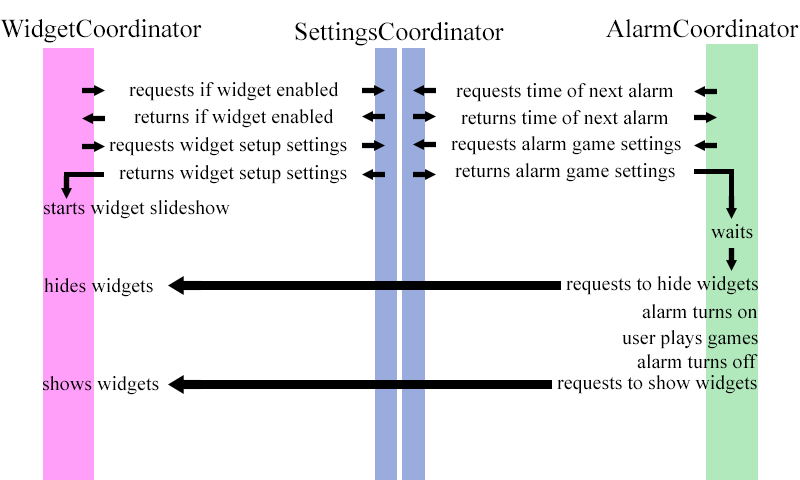
<style>
.page{position:relative;width:800px;height:480px;background:#ffffff}
.page>*{position:absolute;margin:0}
.t1{font:26px "TimesNewRomanPSMT";color:#000000}
.t2{font:20px "TimesNewRomanPSMT";color:#000000}
</style>
<div class="page">
<p class="t1" style="left:0px;top:19px;width:202px;height:24px">WidgetCoordinator</p>
<p class="t1" style="left:295px;top:22px;width:209px;height:24px">SettingsCoordinator</p>
<p class="t1" style="left:606px;top:19px;width:193px;height:19px">AlarmCoordinator</p>
<p class="t2" style="left:129px;top:82px;width:210px;height:19px">requests if widget enabled</p>
<p class="t2" style="left:456px;top:83px;width:218px;height:19px">requests time of next alarm</p>
<p class="t2" style="left:134px;top:109px;width:200px;height:19px">returns if widget enabled</p>
<p class="t2" style="left:461px;top:110px;width:208px;height:15px">returns time of next alarm</p>
<p class="t2" style="left:109px;top:137px;width:238px;height:19px">requests widget setup settings</p>
<p class="t2" style="left:451px;top:136px;width:230px;height:19px">requests alarm game settings</p>
<p class="t2" style="left:119px;top:165px;width:228px;height:19px">returns widget setup settings</p>
<p class="t2" style="left:455px;top:163px;width:220px;height:19px">returns alarm game settings</p>
<p class="t2" style="left:44px;top:200px;width:186px;height:19px">starts widget slideshow</p>
<p class="t2" style="left:711px;top:224px;width:42px;height:15px">waits</p>
<p class="t2" style="left:44px;top:278px;width:109px;height:19px">hides widgets</p>
<p class="t2" style="left:566px;top:276px;width:192px;height:19px">requests to hide widgets</p>
<p class="t2" style="left:642px;top:304px;width:116px;height:15px">alarm turns on</p>
<p class="t2" style="left:622px;top:330px;width:136px;height:19px">user plays games</p>
<p class="t2" style="left:637px;top:354px;width:121px;height:15px">alarm turns off</p>
<p class="t2" style="left:43px;top:376px;width:116px;height:19px">shows widgets</p>
<p class="t2" style="left:557px;top:375px;width:200px;height:19px">requests to show widgets</p>
</div>
